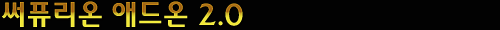
<style>
.page{position:relative;width:500px;height:30px;background:#020202}
.page>*{position:absolute;margin:0}
.t1{font:30px "2002L"}
</style>
<div class="page">
<p class="t1" style="left:2px;top:1px;width:241px;height:26px">써퓨리온 애드온 2.0</p>
</div>
